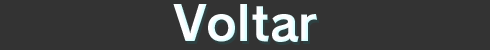
<style>
.page{position:relative;width:490px;height:50px;background:#333333}
.page>*{position:absolute;margin:0}
.t1{font:48px "RodinPro-B";color:#fffeff}
</style>
<div class="page">
<p class="t1" style="left:173px;top:4px;width:144px;height:38px">Voltar</p>
</div>
